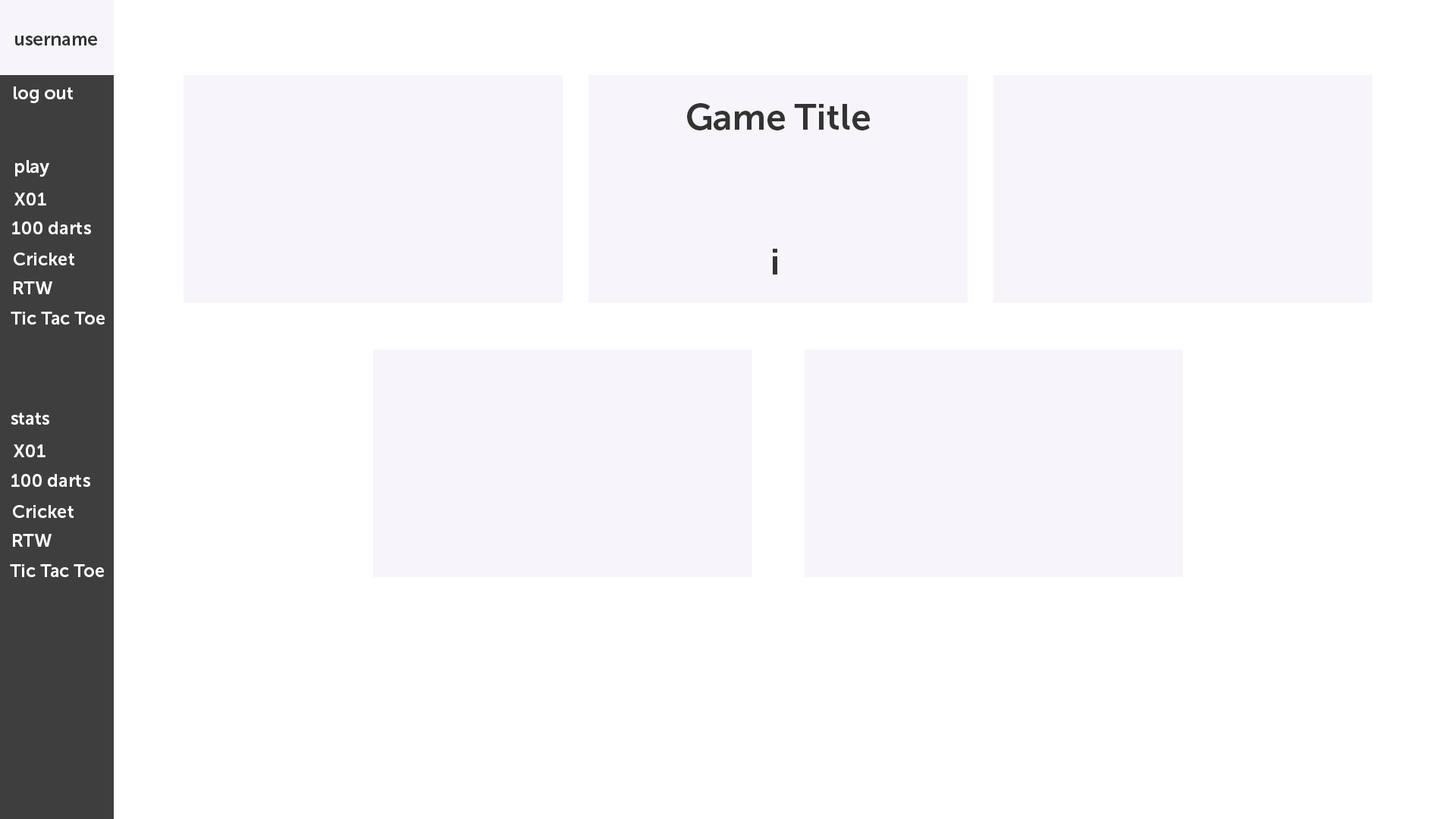
<style>
.page{position:relative;width:1456px;height:819px;background:#ffffff}
.page>*{position:absolute;margin:0}
.t1{font:18.2px "MuseoSans-700";color:#333333}
.t2{font:18.2px "MuseoSans-700";color:#ffffff}
.t3{font:36.4px "MuseoSans-700";color:#333333}
</style>
<div class="page">
<p class="t1" style="left:15px;top:36px;width:82px;height:9px">username</p>
<p class="t2" style="left:14px;top:86px;width:59px;height:17px">log out</p>
<p class="t3" style="left:687px;top:103px;width:183px;height:27px">Game Title</p>
<p class="t2" style="left:15px;top:160px;width:34px;height:17px">play</p>
<p class="t2" style="left:14px;top:193px;width:32px;height:13px">X01</p>
<p class="t2" style="left:12px;top:221px;width:79px;height:13px">100 darts</p>
<p class="t2" style="left:14px;top:253px;width:60px;height:12px">Cricket</p>
<p class="t3" style="left:773px;top:249px;width:4px;height:26px">i</p>
<p class="t2" style="left:14px;top:281px;width:38px;height:13px">RTW</p>
<p class="t2" style="left:11px;top:312px;width:94px;height:13px">Tic Tac Toe</p>
<p class="t2" style="left:11px;top:413px;width:38px;height:12px">stats</p>
<p class="t2" style="left:14px;top:444px;width:31px;height:13px">X01</p>
<p class="t2" style="left:11px;top:474px;width:79px;height:13px">100 darts</p>
<p class="t2" style="left:13px;top:505px;width:61px;height:13px">Cricket</p>
<p class="t2" style="left:13px;top:534px;width:39px;height:13px">RTW</p>
<p class="t2" style="left:10px;top:564px;width:94px;height:13px">Tic Tac Toe</p>
</div>
